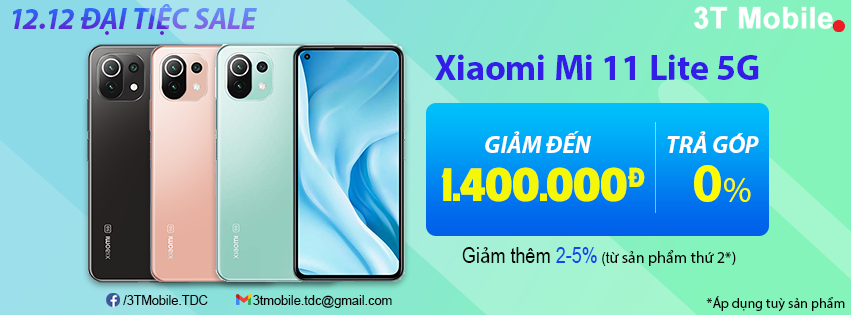
<style>
.page{position:relative;width:851px;height:315px}
.page>*{position:absolute;margin:0}
.t1{font:30px "MyriadPro-BoldIt"}
.t2{font:36px "MyriadPro-Bold";color:#351de8}
.t3{font:24px "MyriadPro-BoldIt";color:#ffffff}
.t4{font:42px "UTM-American-Sans";color:#f4f708}
.t5{font:56px "MyriadPro-Bold";color:#fffc00;text-transform:uppercase}
.t6{font:36px "MyriadPro-Regular";color:#fffc00;text-transform:uppercase}
.t7{font:16px "MyriadPro-Regular";color:#040404}
.t8{font:22px "ArialNarrow";color:#040404}
.t9{font:22px "MyriadPro-Regular";color:#040404}
.t10{font:22px "ArialNarrow";color:#0e47f2}
.t11{font:16px "ArialNarrow";color:#040404}
.t12{font:12.5px "ArialMT";color:#030303}
.t13{font:12.7px "ArialMT";color:#030303}
.t14{font:14px "MyriadPro-Regular";color:#040404}
</style>
<div class="page">
<p class="t1" style="left:13px;top:4px;width:244px;height:31px">12.12 ĐẠI TIỆC SALE</p>
<p class="t2" style="left:435px;top:54px;width:324px;height:26px">Xiaomi Mi 11 Lite 5G</p>
<p class="t3" style="left:485px;top:131px;width:106px;height:22px">GIẢM ĐẾN</p>
<p class="t3" style="left:667px;top:131px;width:92px;height:22px">TRẢ GÓP</p>
<p class="t4" style="left:441px;top:167px;width:204px;height:35px">1.400.000Đ</p>
<p class="t5" style="left:694px;top:165px;width:57px;height:37px">0<span class="t6">%</span></p>
<p class="t7" style="left:462px;top:247px;width:274px;height:19px"><span class="t8">Gi</span><span class="t9">ả</span><span class="t8">m thêm </span><span class="t10">2-5%</span><span class="t11"> (t</span>ừ sản phẩm thứ 2*)</p>
<p class="t12" style="left:123px;top:295px;width:85px;height:10px">/3TMobile.TDC</p>
<p class="t13" style="left:253px;top:295px;width:139px;height:13px">3tmobile.tdc@gmail.com</p>
<p class="t14" style="left:706px;top:296px;width:139px;height:16px">*Áp dụng tuỳ sản phẩm</p>
</div>
